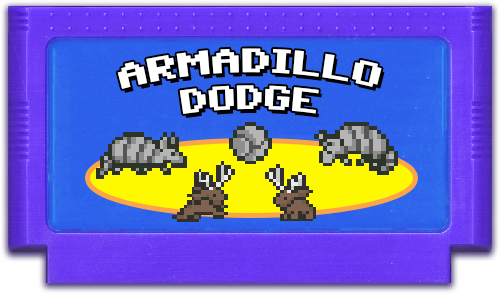
<style>
.page{position:relative;width:500px;height:294px}
.page>*{position:absolute;margin:0}
.t1{font:27px "C64Pro";color:#ffffff;text-transform:uppercase;scale:1.14 1}
</style>
<div class="page">
<p class="t1" style="left:117px;top:48px;width:265px;height:66px;text-align:center">armadillo<br>dodge</p>
</div>
